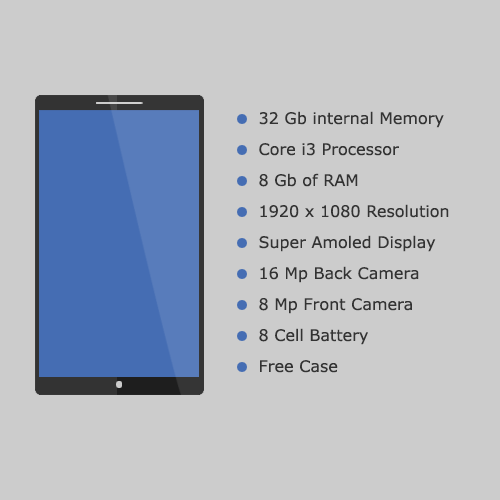
<style>
.page{position:relative;width:500px;height:500px;background:#cccccc}
.page>*{position:absolute;margin:0}
.t1{font:16px "Verdana";color:#333333}
</style>
<div class="page">
<p class="t1" style="left:259px;top:111px;width:185px;height:17px">32 Gb internal Memory</p>
<p class="t1" style="left:259px;top:143px;width:140px;height:13px">Core i3 Processor</p>
<p class="t1" style="left:259px;top:173px;width:99px;height:14px">8 Gb of RAM</p>
<p class="t1" style="left:260px;top:204px;width:189px;height:14px">1920 x 1080 Resolution</p>
<p class="t1" style="left:259px;top:235px;width:177px;height:17px">Super Amoled Display</p>
<p class="t1" style="left:260px;top:266px;width:159px;height:17px">16 Mp Back Camera</p>
<p class="t1" style="left:259px;top:298px;width:153px;height:16px">8 Mp Front Camera</p>
<p class="t1" style="left:259px;top:328px;width:109px;height:17px">8 Cell Battery</p>
<p class="t1" style="left:260px;top:360px;width:78px;height:13px">Free Case</p>
</div>
